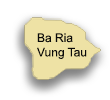
<style>
.page{position:relative;width:110px;height:100px;background:#ffffff}
.page>*{position:absolute;margin:0}
.t1{font:12px "ArialMT";color:#0a0a0a}
</style>
<div class="page">
<p class="t1" style="left:37px;top:33px;width:50px;height:26px">Ba Ria<br>Vung Tau</p>
</div>
